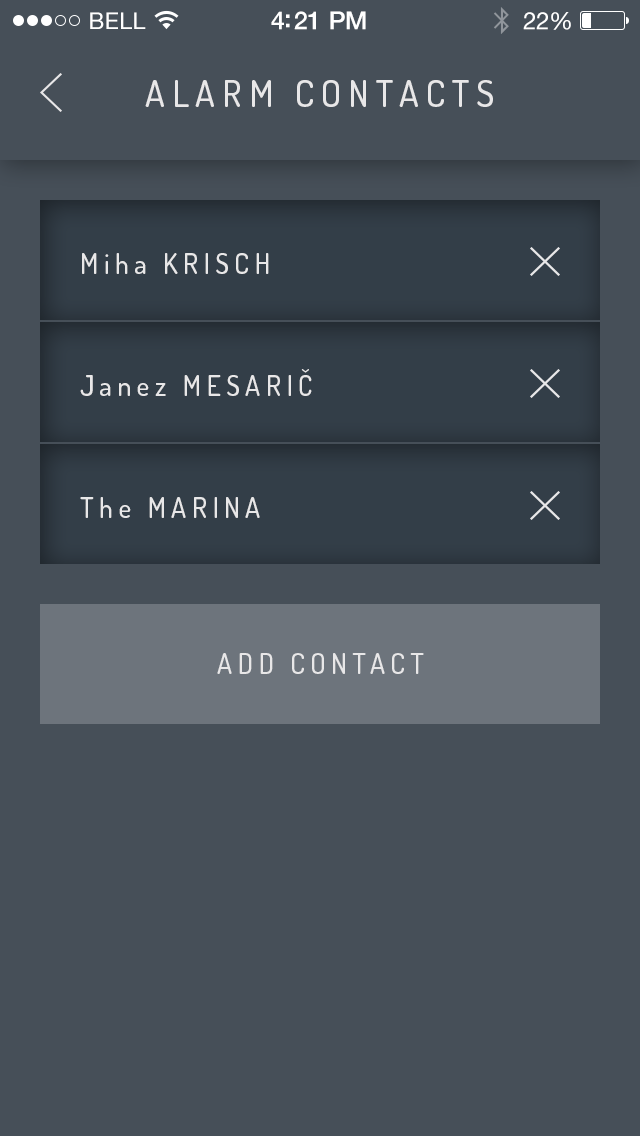
<style>
.page{position:relative;width:640px;height:1136px;background:#464f58}
.page>*{position:absolute;margin:0}
.t1{font:23px "HelveticaNeue";letter-spacing:0.02em;color:#ffffff}
.t2{font:25px "HelveticaNeue-Medium";letter-spacing:-0.02em;color:#ffffff}
.t3{font:24px "HelveticaNeue";letter-spacing:-0.02em;color:#ffffff}
.t4{font:36px "Dosis-Medium";letter-spacing:0.2em;color:#e8e7e8}
.t5{font:28px/106.1px "Dosis-Medium";letter-spacing:0.2em;color:#e8e7e8}
.t6{font:25.2px/106.1px "DINPro-Medium";letter-spacing:0.2em;color:#e8e7e8}
.t7{font:27.8px/105.7px "Dosis-Medium";letter-spacing:0.2em;color:#e8e7e8}
.t8{font:25.2px/105.7px "DINPro-Medium";letter-spacing:0.2em;color:#e8e7e8}
</style>
<div class="page">
<p class="t1" style="left:90px;top:12px;width:56px;height:17px">BELL</p>
<p class="t2" style="left:271px;top:11px;width:95px;height:19px">4:21 PM</p>
<p class="t3" style="left:523px;top:12px;width:48px;height:18px">22%</p>
<p class="t4" style="left:145px;top:80px;width:348px;height:27px">ALARM CONTACTS</p>
<p class="t5" style="left:82px;top:253px;width:187px;height:21px">Miha KRISCH<br><span class="t6">ISCH</span></p>
<p class="t5" style="left:80px;top:369px;width:232px;height:27px">Janez MESARIČ<br><span class="t6">ISCH</span></p>
<p class="t5" style="left:80px;top:497px;width:180px;height:21px">The MARINA<br><span class="t6">ISCH</span></p>
<p class="t7" style="left:217px;top:653px;width:207px;height:21px;text-align:center">ADD CONTACT<br><span class="t8">ISCH</span></p>
</div>
